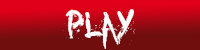
<style>
.page{position:relative;width:200px;height:50px;background:#700e0e}
.page>*{position:absolute;margin:0}
.t1{font:55.4px "YouMurdererBB";color:#fbfbfb}
</style>
<div class="page">
<p class="t1" style="left:63px;top:9px;width:73px;height:40px">play</p>
</div>
